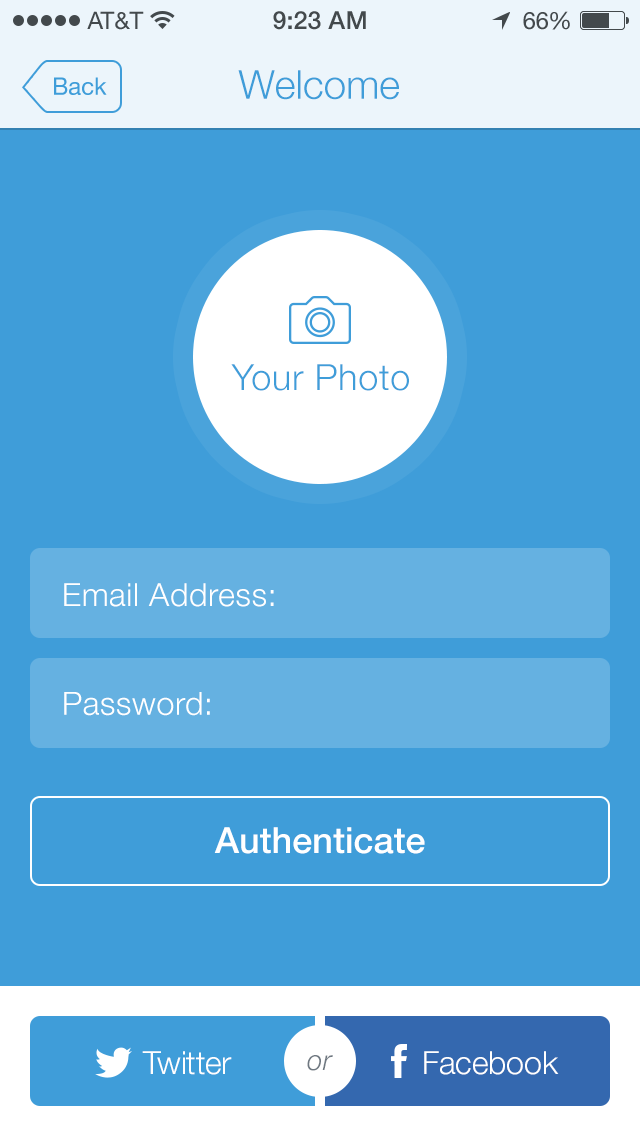
<style>
.page{position:relative;width:640px;height:1136px;background:#3f9dd9}
.page>*{position:absolute;margin:0}
.t1{font:24px "HelveticaNeue";color:#43494c}
.t2{font:25px "HelveticaNeue-Medium";color:#43494c}
.t3{font:24px "HelveticaNeue";letter-spacing:-0.02em;color:#43494c}
.t4{font:24px "HelveticaNeue";color:#3f9dd9}
.t5{font:40px "HelveticaNeue-Light";color:#3f9dd9}
.t6{font:36px "HelveticaNeue-Light";letter-spacing:0.02em;color:#3f9dd9}
.t7{font:32px "HelveticaNeue-Light";letter-spacing:0.02em;color:#ffffff}
.t8{font:36px "HelveticaNeue-Medium";color:#ffffff}
.t9{font:32px "HelveticaNeue-Light";color:#ffffff}
.t10{font:28px "HelveticaNeue-LightItalic";color:#6f7881}
</style>
<div class="page">
<p class="t1" style="left:87px;top:11px;width:57px;height:19px">AT&amp;T</p>
<p class="t2" style="left:273px;top:11px;width:93px;height:19px">9:23 AM</p>
<p class="t1" style="left:523px;top:11px;width:47px;height:19px">6<span class="t3">6</span>%</p>
<p class="t4" style="left:54px;top:77px;width:53px;height:18px">Back</p>
<p class="t5" style="left:238px;top:70px;width:161px;height:30px">Welcome</p>
<p class="t6" style="left:231px;top:364px;width:178px;height:27px">Your Photo</p>
<p class="t7" style="left:64px;top:583px;width:210px;height:24px">Email Address:</p>
<p class="t7" style="left:64px;top:692px;width:146px;height:24px">Password:</p>
<p class="t8" style="left:214px;top:827px;width:211px;height:27px">Authenticate</p>
<p class="t9" style="left:142px;top:1051px;width:90px;height:24px">Twitter</p>
<p class="t10" style="left:307px;top:1055px;width:26px;height:16px">or</p>
<p class="t9" style="left:424px;top:1051px;width:135px;height:24px">Facebook</p>
</div>
